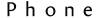
<style>
.page{position:relative;width:100px;height:18px;background:#ffffff}
.page>*{position:absolute;margin:0}
.t1{font:20px "Amira-Roman";letter-spacing:0.1em;color:#000000}
</style>
<div class="page">
<p class="t1" style="left:7px;top:1px;width:85px;height:16px;opacity:0.96">P h o n e</p>
</div>
